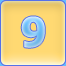
<style>
.page{position:relative;width:66px;height:66px}
.page>*{position:absolute;margin:0}
.t1{font:41px "Tahoma-Bold"}
</style>
<div class="page">
<p class="t1" style="left:21px;top:16px;width:24px;height:32px">9</p>
<p class="t1" style="left:21px;top:16px;width:24px;height:32px">9</p>
</div>
